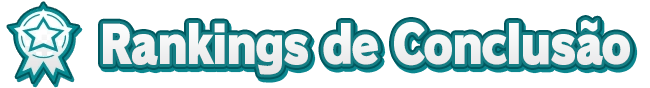
<style>
.page{position:relative;width:650px;height:88px;background:#ffffff}
.page>*{position:absolute;margin:0}
.t1{font:52px "RodinPro-UB";letter-spacing:-0.041em;color:#f1f2f2;scale:0.87 1}
</style>
<div class="page">
<p class="t1" style="left:103px;top:20px;width:527px;height:55px">Rankings de Conclusão</p>
</div>
